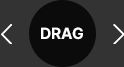
<style>
.page{position:relative;width:124px;height:67px;background:#333333}
.page>*{position:absolute;margin:0}
.t1{font:16px "Pretendard-Bold";color:#ffffff}
</style>
<div class="page">
<p class="t1" style="left:41px;top:27px;width:42px;height:13px">DRAG</p>
</div>
